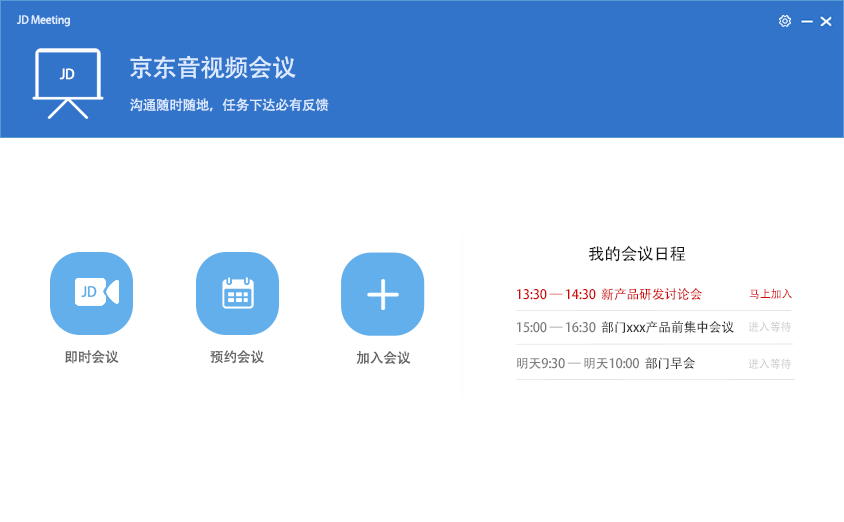
<style>
.page{position:relative;width:844px;height:522px;background:#ffffff}
.page>*{position:absolute;margin:0}
.t1{font:10.8px "AdobeHeitiStd-Regular";letter-spacing:-0.02em;color:#dbeaff}
.t2{font:24.3px "AdobeHeitiStd-Regular";letter-spacing:-0.02em;color:#dbeaff}
.t3{font:13.5px "AdobeHeitiStd-Regular";letter-spacing:-0.02em;color:#fefefe}
.t4{font:13.5px "AdobeHeitiStd-Regular";letter-spacing:-0.02em;color:#dbeaff}
.t5{font:16.6px "AdobeHeitiStd-Regular";letter-spacing:-0.02em;color:#171717}
.t6{font:12.9px "AdobeHeitiStd-Regular";letter-spacing:-0.02em;color:#d00707}
.t7{font:11.1px "AdobeHeitiStd-Regular";letter-spacing:-0.02em;color:#d80303}
.t8{font:12.9px "AdobeHeitiStd-Regular";letter-spacing:-0.02em;color:#7c7c7c}
.t9{font:12.9px "AdobeHeitiStd-Regular";letter-spacing:-0.02em;color:#333333}
.t10{font:11.1px "AdobeHeitiStd-Regular";letter-spacing:-0.02em;color:#cccccc}
.t11{font:13.9px "AdobeHeitiStd-Regular";letter-spacing:-0.02em;color:#666666}
</style>
<div class="page">
<p class="t1" style="left:17px;top:15px;width:53px;height:12px">JD Meeting</p>
<p class="t2" style="left:130px;top:55px;width:166px;height:24px">京东音视频会议</p>
<p class="t3" style="left:59px;top:68px;width:16px;height:12px">JD</p>
<p class="t4" style="left:130px;top:98px;width:199px;height:14px">沟通随时随地，任务下达必有反馈</p>
<p class="t5" style="left:588px;top:246px;width:98px;height:16px">我的会议日程</p>
<p class="t6" style="left:517px;top:288px;width:185px;height:13px">13:30 — 14:30  新产品研发讨论会</p>
<p class="t7" style="left:749px;top:288px;width:43px;height:11px">马上加入</p>
<p class="t8" style="left:517px;top:321px;width:217px;height:13px">15:00 — 16:30  <span class="t9">部门xxx产品前集中会议</span></p>
<p class="t10" style="left:748px;top:321px;width:43px;height:11px">进入等待</p>
<p class="t11" style="left:65px;top:350px;width:54px;height:14px">即时会议</p>
<p class="t11" style="left:210px;top:350px;width:54px;height:14px">预约会议</p>
<p class="t11" style="left:356px;top:351px;width:55px;height:14px">加入会议</p>
<p class="t8" style="left:517px;top:357px;width:178px;height:13px">明天9:30 — 明天10:00  <span class="t9">部门早会</span></p>
<p class="t10" style="left:748px;top:358px;width:43px;height:11px">进入等待</p>
</div>
